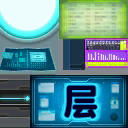
<style>
.page{position:relative;width:128px;height:128px}
.page>*{position:absolute;margin:0}
.t1{font:36px "JiangChengYuanTi-700W";color:#00002b}
</style>
<div class="page">
<p class="t1" style="left:64px;top:85px;width:33px;height:34px">层</p>
</div>
